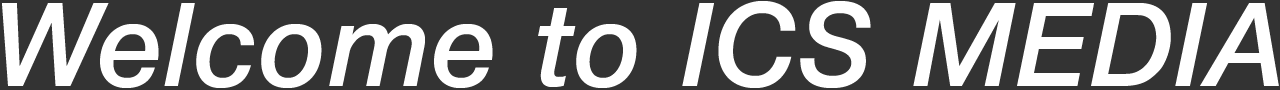
<style>
.page{position:relative;width:1280px;height:90px;background:#333333}
.page>*{position:absolute;margin:0}
.t1{font:115.7px "HelveticaNeue-MediumItalic";letter-spacing:0.03em;color:#ffffff}
</style>
<div class="page">
<p class="t1" style="left:2px;top:1px;width:1277px;height:87px">Welcome to ICS MEDIA</p>
</div>
